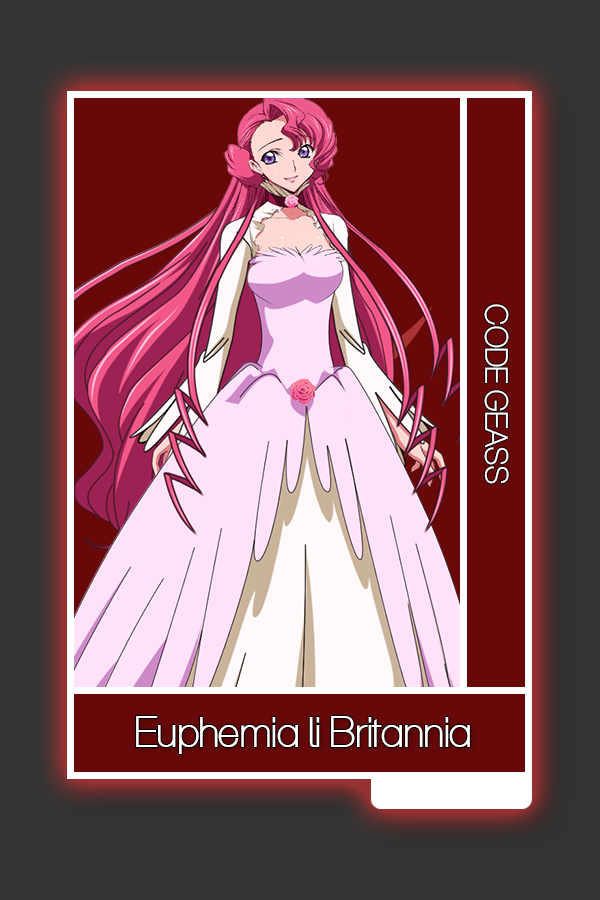
<style>
.page{position:relative;width:600px;height:900px;background:#333333}
.page>*{position:absolute;margin:0}
.t1{font:31.2px "Aliquam";color:#ffffff}
.t2{font:43.2px "Aliquam";color:#ffffff}
</style>
<div class="page">
<p class="t1" style="left:484px;top:304px;width:25px;height:180px;rotate:90deg">CODE GEASS</p>
<p class="t2" style="left:136px;top:716px;width:334px;height:38px">Euphemia li Britannia</p>
</div>
